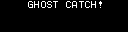
<style>
.page{position:relative;width:128px;height:32px;background:#000000}
.page>*{position:absolute;margin:0}
.t1{font:10px "Terminal";letter-spacing:-0.1em;color:#ffffff}
</style>
<div class="page">
<p class="t1" style="left:28px;top:1px;width:74px;height:7px">GHOST CATCH!</p>
</div>
